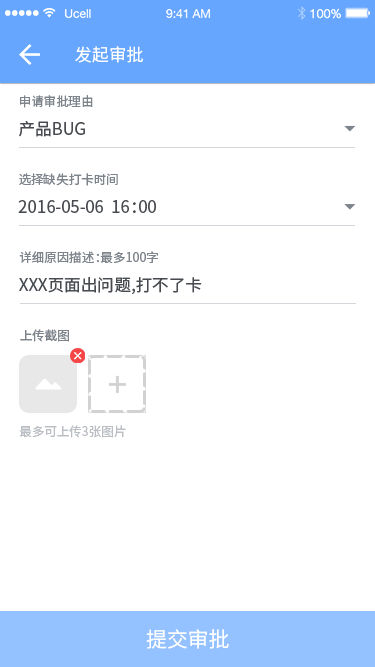
<style>
.page{position:relative;width:375px;height:667px;background:#ffffff}
.page>*{position:absolute;margin:0}
.t1{font:17.4px "NotoSansHans-Regular";color:#ffffff}
.t2{font:12.5px "NotoSansHans-Regular";color:#7e848c}
.t3{font:16.7px "NotoSansHans-Regular";color:#474a4f}
.t4{font:16.6px "NotoSansHans-Regular";color:#474a4f}
.t5{font:12.5px "NotoSansHans-Regular";color:#bbbfc4}
.t6{font:20.8px "NotoSansHans-Regular";color:#ffffff}
</style>
<div class="page">
<p class="t1" style="left:75px;top:46px;width:68px;height:17px">发起审批</p>
<p class="t2" style="left:20px;top:95px;width:73px;height:13px">申请审批理由</p>
<p class="t3" style="left:19px;top:121px;width:66px;height:16px">产品BUG</p>
<p class="t2" style="left:19px;top:173px;width:99px;height:13px">选择缺失打卡时间</p>
<p class="t3" style="left:18px;top:200px;width:138px;height:13px">2016-05-06  16：00</p>
<p class="t2" style="left:19px;top:251px;width:139px;height:12px">详细原因描述：最多100字</p>
<p class="t4" style="left:19px;top:277px;width:183px;height:17px">XXX页面出问题,打不了卡</p>
<p class="t2" style="left:20px;top:329px;width:49px;height:13px">上传截图</p>
<p class="t5" style="left:19px;top:425px;width:107px;height:13px">最多可上传3张图片</p>
<p class="t6" style="left:146px;top:629px;width:83px;height:20px">提交审批</p>
</div>
